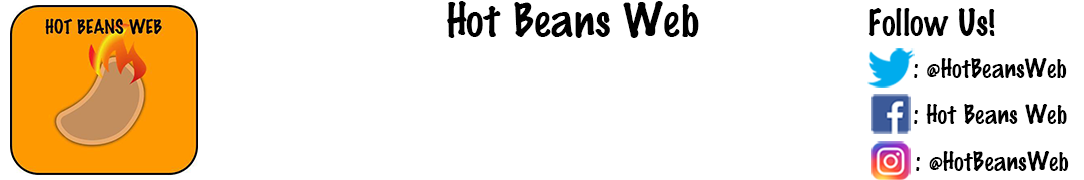
<style>
.page{position:relative;width:1084px;height:180px;background:#ffffff}
.page>*{position:absolute;margin:0}
.t1{font:48.4px "MarkingPen";color:#000000}
.t2{font:37.7px "MarkingPen";color:#000000}
.t3{font:26.9px "MarkingPen";color:#000000}
</style>
<div class="page">
<p class="t1" style="left:447px;top:1px;width:252px;height:37px">Hot Beans Web</p>
<p class="t2" style="left:868px;top:8px;width:127px;height:28px">Follow Us!</p>
<p class="t3" style="left:914px;top:58px;width:153px;height:20px">: @HotBeansWeb</p>
<p class="t3" style="left:914px;top:104px;width:153px;height:20px">: Hot Beans Web</p>
<p class="t3" style="left:916px;top:151px;width:153px;height:20px">: @HotBeansWeb</p>
</div>
